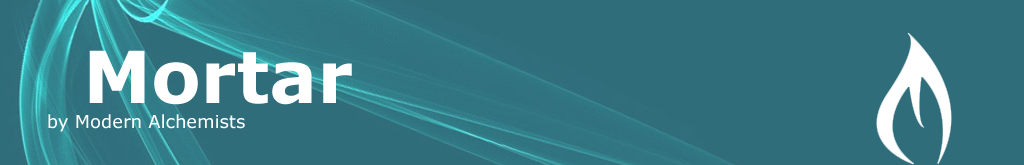
<style>
.page{position:relative;width:1024px;height:165px;background:#2f6d7a}
.page>*{position:absolute;margin:0}
.t1{font:72px "Verdana-Bold";color:#ffffff}
.t2{font:18px "Verdana";color:#ffffff}
</style>
<div class="page">
<p class="t1" style="left:89px;top:50px;width:263px;height:55px">Mortar</p>
<p class="t2" style="left:48px;top:114px;width:197px;height:18px">by Modern Alchemists</p>
</div>
